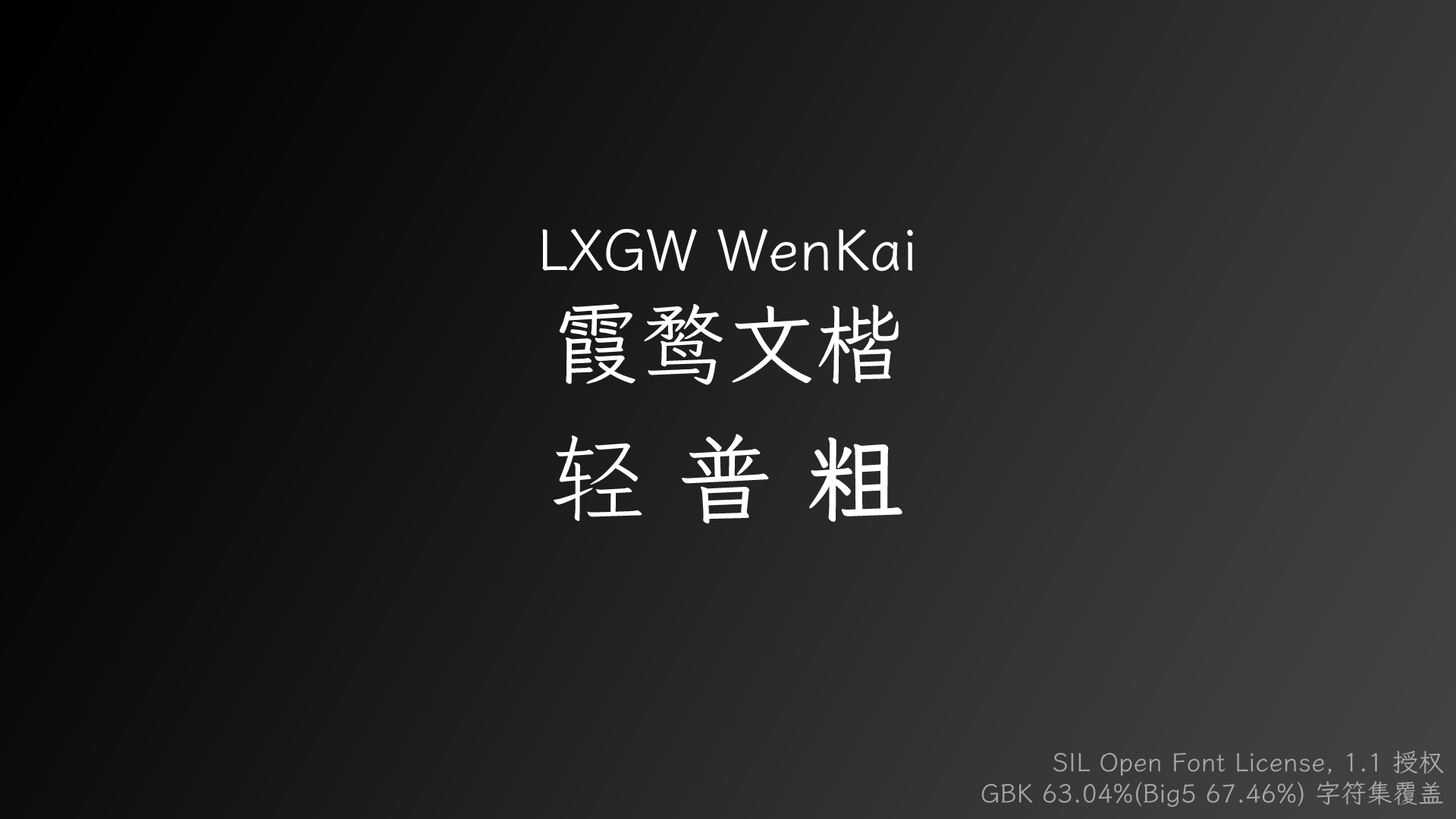
<style>
.page{position:relative;width:1456px;height:819px}
.page>*{position:absolute;margin:0}
.t1{font:57.6px "LXGWWenKai-Regular";color:#ffffff}
.t2{font:88px "LXGWWenKai-Regular";color:#ffffff}
.t3{font:95.5px "LXGWWenKai-Light";color:#ffffff}
.t4{font:95.5px "LXGWWenKai-Regular";color:#ffffff}
.t5{font:95.5px "LXGWWenKai-Bold";color:#ffffff}
.t6{font:25.8px "LXGWWenKai-Regular";color:#a6a6a6}
</style>
<div class="page">
<p class="t1" style="left:542px;top:228px;width:371px;height:157px;text-align:center">LXGW WenKai<br><span class="t2">霞鹜文楷</span></p>
<p class="t3" style="left:553px;top:434px;width:349px;height:90px">轻 <span class="t4">普 </span><span class="t5">粗</span></p>
<p class="t6" style="left:981px;top:750px;width:463px;height:57px;text-align:right">SIL Open Font License, 1.1 授权<br> GBK 63.04%(Big5 67.46%) 字符集覆盖</p>
</div>
